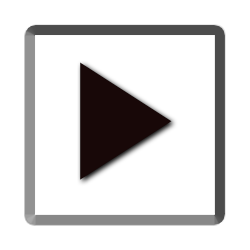
<style>
.page{position:relative;width:250px;height:250px;background:#ffffff}
.page>*{position:absolute;margin:0}
.t1{font:150px "Gulim";color:#180808}
</style>
<div class="page">
<p class="t1" style="left:80px;top:62px;width:92px;height:118px">▶</p>
</div>
